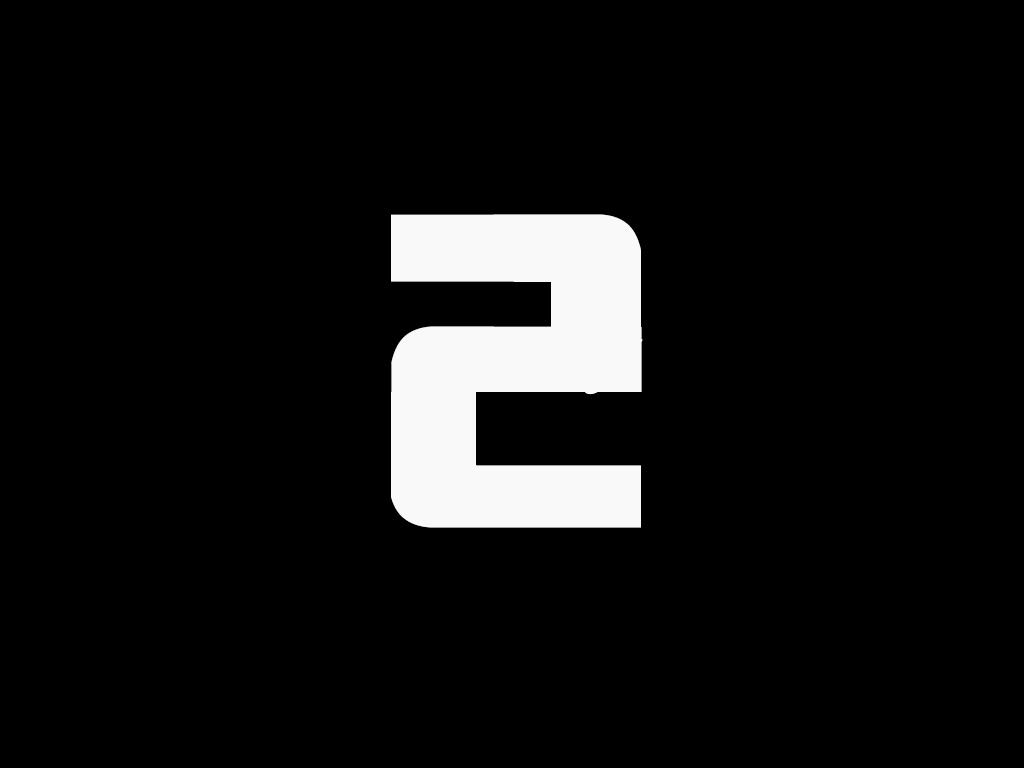
<style>
.page{position:relative;width:1024px;height:768px;background:#000000}
.page>*{position:absolute;margin:0}
.t1{font:500px "TransformersMovie";color:#f9f9f9}
</style>
<div class="page">
<p class="t1" style="left:391px;top:214px;width:252px;height:314px">2</p>
</div>
